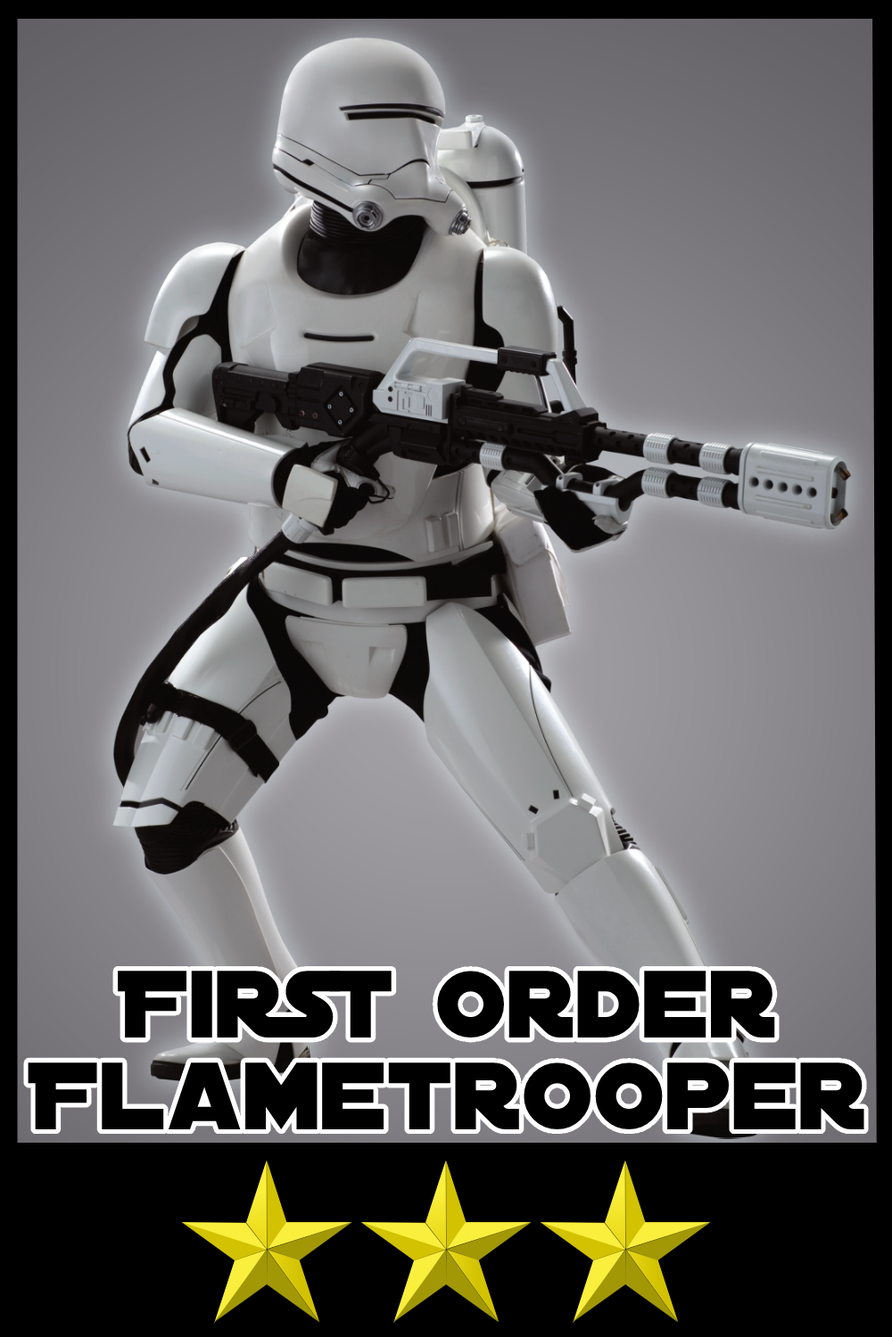
<style>
.page{position:relative;width:892px;height:1337px}
.page>*{position:absolute;margin:0}
.t1{font:102.4px/92.2px "DistantGalaxy";color:#000000}
</style>
<div class="page">
<p class="t1" style="left:28px;top:971px;width:836px;height:159px;text-align:center">First Order<br>Flametrooper</p>
</div>
